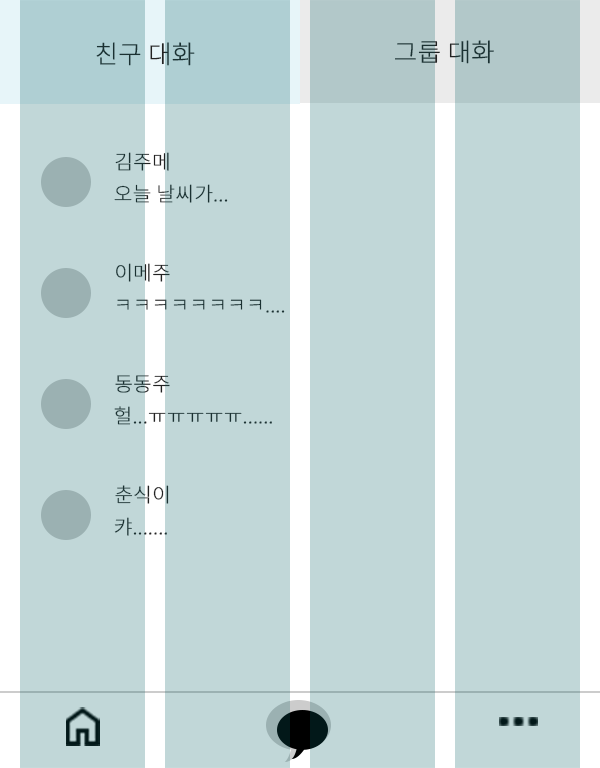
<style>
.page{position:relative;width:600px;height:768px;background:#c1d7d8}
.page>*{position:absolute;margin:0}
.t1{font:25px "NotoSansKR-Thin";color:#222222;font-weight:bold}
.t2{font:20px "NotoSansKR-Thin";color:#222222;font-weight:bold}
</style>
<div class="page">
<p class="t1" style="left:395px;top:40px;width:99px;height:24px">그룹 대화</p>
<p class="t1" style="left:96px;top:42px;width:99px;height:24px">친구 대화</p>
<p class="t2" style="left:115px;top:152px;width:54px;height:19px">김주메</p>
<p class="t2" style="left:114px;top:184px;width:114px;height:19px">오늘 날씨가...</p>
<p class="t2" style="left:116px;top:263px;width:54px;height:19px">이메주</p>
<p class="t2" style="left:117px;top:299px;width:168px;height:14px">ㅋㅋㅋㅋㅋㅋㅋㅋ....</p>
<p class="t2" style="left:115px;top:375px;width:55px;height:18px">동동주</p>
<p class="t2" style="left:114px;top:406px;width:158px;height:19px">헐...ㅠㅠㅠㅠㅠ......</p>
<p class="t2" style="left:115px;top:485px;width:54px;height:19px">춘식이</p>
<p class="t2" style="left:114px;top:517px;width:53px;height:19px">캬.......</p>
</div>
